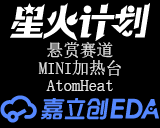
<style>
.page{position:relative;width:160px;height:128px;background:#000000}
.page>*{position:absolute;margin:0}
.t1{font:16.7px "SimSun";color:#e4e4e4}
</style>
<div class="page">
<p class="t1" style="left:47px;top:42px;width:66px;height:16px">悬赏赛道</p>
<p class="t1" style="left:38px;top:60px;width:83px;height:16px">MINI加热台</p>
<p class="t1" style="left:46px;top:80px;width:67px;height:11px">AtomHeat</p>
</div>
